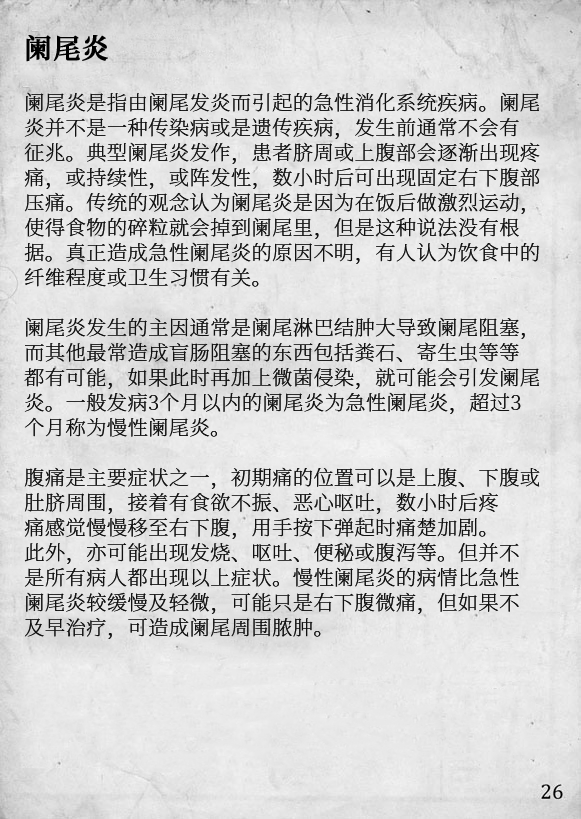
<style>
.page{position:relative;width:581px;height:819px}
.page>*{position:absolute;margin:0}
.t1{font:20.2px/25px "SourceHanSerifCN-ExtraLight";letter-spacing:0.02em;color:#111111}
.t2{font:27.2px/29px "SourceHanSerifCN-SemiBold";letter-spacing:0.02em;color:#000000;font-weight:bold}
</style>
<div class="page">
<p class="t1" style="left:24px;top:35px;width:516px;height:604px"><span class="t2">阑尾炎<br><br></span>阑尾炎是指由阑尾发炎而引起的急性消化系统疾病。阑尾<br>炎并不是一种传染病或是遗传疾病，发生前通常不会有<br>征兆。典型阑尾炎发作，患者脐周或上腹部会逐渐出现疼<br>痛，或持续性，或阵发性，数小时后可出现固定右下腹部<br>压痛。传统的观念认为阑尾炎是因为在饭后做激烈运动，<br>使得食物的碎粒就会掉到阑尾里，但是这种说法没有根<br>据。真正造成急性阑尾炎的原因不明，有人认为饮食中的<br>纤维程度或卫生习惯有关。<br><br>阑尾炎发生的主因通常是阑尾淋巴结肿大导致阑尾阻塞，<br>而其他最常造成盲肠阻塞的东西包括粪石、寄生虫等等<br>都有可能，如果此时再加上微菌侵染，就可能会引发阑尾<br>炎。一般发病3个月以内的阑尾炎为急性阑尾炎，超过3<br>个月称为慢性阑尾炎。<br><br>腹痛是主要症状之一，初期痛的位置可以是上腹、下腹或<br>肚脐周围，接着有食欲不振、恶心呕吐，数小时后疼<br>痛感觉慢慢移至右下腹，用手按下弹起时痛楚加剧。<br>此外，亦可能出现发烧、呕吐、便秘或腹泻等。但并不<br>是所有病人都出现以上症状。慢性阑尾炎的病情比急性<br>阑尾炎较缓慢及轻微，可能只是右下腹微痛，但如果不<br>及早治疗，可造成阑尾周围脓肿。</p>
</div>
